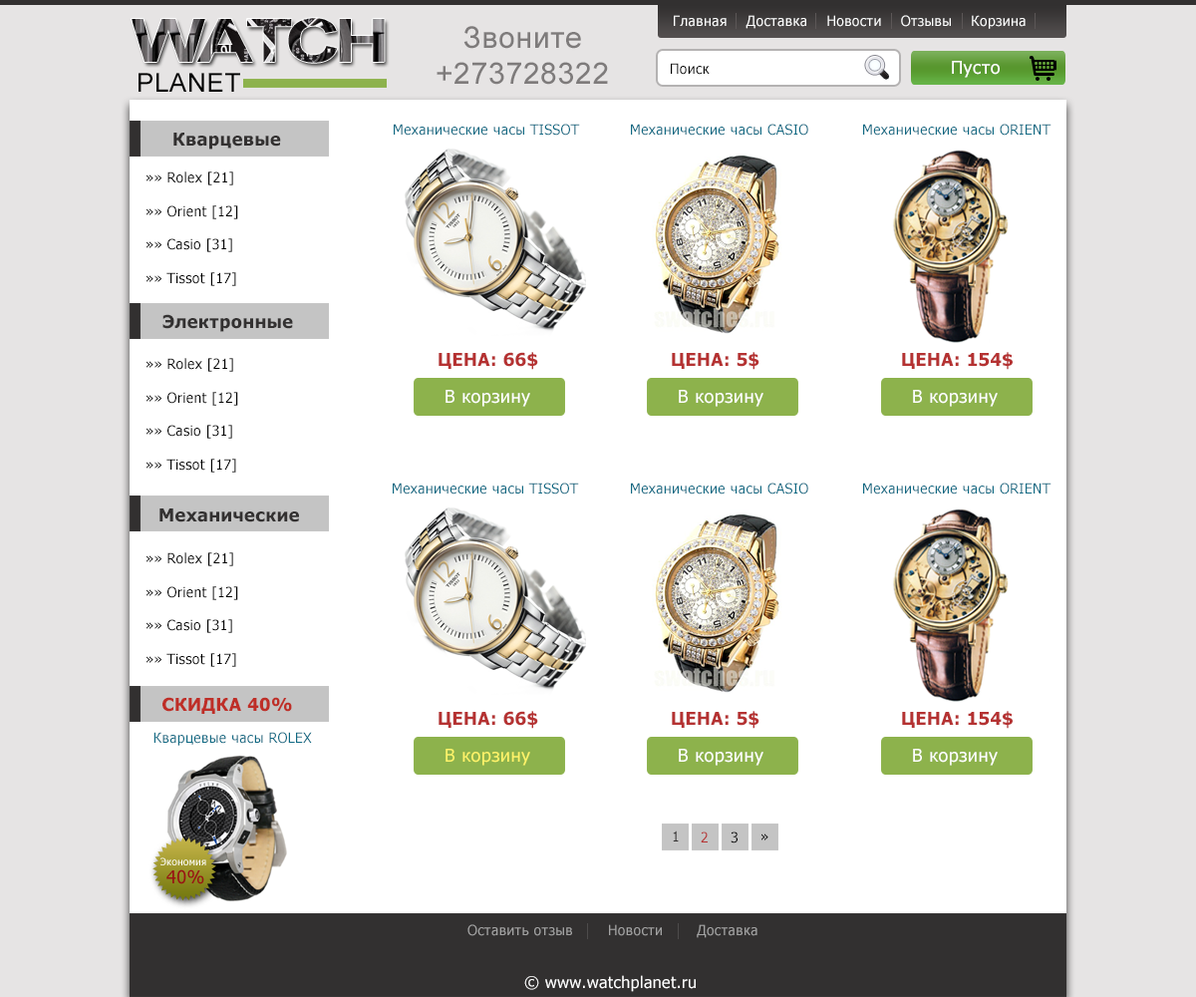
<style>
.page{position:relative;width:1196px;height:997px;background:#ffffff}
.page>*{position:absolute;margin:0}
.t1{font:14px "Tahoma";letter-spacing:0.025em;color:#ffffff}
.t2{font:29.9px "ArialMT";letter-spacing:0.025em;color:#7e7b7b}
.t3{font:14px "Tahoma";letter-spacing:0.025em;color:#010101}
.t4{font:17.9px "Tahoma";letter-spacing:0.025em;color:#ffffff}
.t5{font:25.9px "ArialMT";letter-spacing:0.025em;color:#000000}
.t6{font:14px "Tahoma";letter-spacing:0.025em;color:#0f6a84}
.t7{font:17.9px "Tahoma-Bold";letter-spacing:0.025em;color:#333131}
.t8{font:14px "Tahoma";letter-spacing:0.025em;color:#000000}
.t9{font:17.9px "Tahoma-Bold";letter-spacing:0.025em;color:#b53232}
.t10{font:17.9px "Tahoma-Bold";letter-spacing:0.025em;color:#be2e27}
.t11{font:17.9px "Tahoma";letter-spacing:0.025em;color:#fff369}
.t12{font:14px "Tahoma";letter-spacing:0.025em;color:#323030}
.t13{font:14px "Tahoma";letter-spacing:0.025em;color:#b53232}
.t14{font:14px "Tahoma";letter-spacing:0.025em;color:#a3a3a3}
.t15{font:15.9px "Tahoma";letter-spacing:0.025em;color:#ffffff}
</style>
<div class="page">
<p class="t1" style="left:674px;top:15px;width:352px;height:14px">Главная    Доставка    Новости    Отзывы    Корзина</p>
<p class="t2" style="left:437px;top:26px;width:171px;height:59px;text-align:center">Звоните<br>+273728322</p>
<p class="t3" style="left:671px;top:63px;width:39px;height:12px">Поиск</p>
<p class="t4" style="left:952px;top:61px;width:48px;height:17px">Пусто</p>
<p class="t5" style="left:139px;top:73px;width:101px;height:19px">PLANET</p>
<p class="t6" style="left:394px;top:124px;width:186px;height:12px">Механические часы TISSOT</p>
<p class="t6" style="left:631px;top:124px;width:177px;height:12px">Механические часы CASIO</p>
<p class="t6" style="left:863px;top:124px;width:189px;height:12px">Механические часы ORIENT</p>
<p class="t7" style="left:173px;top:133px;width:108px;height:17px">Кварцевые</p>
<p class="t8" style="left:147px;top:171px;width:91px;height:115px">»» Rolex [21]<br><br>»» Orient [12]<br><br>»» Casio [31]<br><br>»» Tissot [17]</p>
<p class="t7" style="left:162px;top:314px;width:131px;height:18px">Электронные</p>
<p class="t9" style="left:439px;top:352px;width:99px;height:18px">ЦЕНА: 66$</p>
<p class="t9" style="left:672px;top:352px;width:88px;height:18px">ЦЕНА: 5$</p>
<p class="t9" style="left:902px;top:352px;width:111px;height:18px">ЦЕНА: 154$</p>
<p class="t8" style="left:147px;top:358px;width:91px;height:115px">»» Rolex [21]<br><br>»» Orient [12]<br><br>»» Casio [31]<br><br>»» Tissot [17]</p>
<p class="t4" style="left:446px;top:390px;width:84px;height:17px">В корзину</p>
<p class="t4" style="left:679px;top:390px;width:85px;height:17px">В корзину</p>
<p class="t4" style="left:913px;top:390px;width:85px;height:17px">В корзину</p>
<p class="t6" style="left:393px;top:482px;width:186px;height:12px">Механические часы TISSOT</p>
<p class="t6" style="left:631px;top:482px;width:177px;height:12px">Механические часы CASIO</p>
<p class="t6" style="left:863px;top:482px;width:189px;height:12px">Механические часы ORIENT</p>
<p class="t7" style="left:159px;top:508px;width:140px;height:14px">Механические</p>
<p class="t8" style="left:147px;top:552px;width:91px;height:115px">»» Rolex [21]<br><br>»» Orient [12]<br><br>»» Casio [31]<br><br>»» Tissot [17]</p>
<p class="t10" style="left:162px;top:697px;width:130px;height:17px">СКИДКА 40%</p>
<p class="t9" style="left:439px;top:711px;width:99px;height:18px">ЦЕНА: 66$</p>
<p class="t9" style="left:672px;top:711px;width:88px;height:18px">ЦЕНА: 5$</p>
<p class="t9" style="left:902px;top:711px;width:111px;height:18px">ЦЕНА: 154$</p>
<p class="t6" style="left:154px;top:732px;width:158px;height:14px">Кварцевые часы ROLEX</p>
<p class="t11" style="left:446px;top:749px;width:84px;height:17px">В корзину</p>
<p class="t4" style="left:679px;top:749px;width:85px;height:17px">В корзину</p>
<p class="t4" style="left:913px;top:749px;width:85px;height:17px">В корзину</p>
<p class="t12" style="left:673px;top:830px;width:6px;height:11px">1</p>
<p class="t13" style="left:701px;top:831px;width:7px;height:11px">2</p>
<p class="t8" style="left:731px;top:831px;width:7px;height:12px">3</p>
<p class="t8" style="left:762px;top:833px;width:7px;height:7px">»</p>
<p class="t14" style="left:468px;top:924px;width:104px;height:12px">Оставить отзыв</p>
<p class="t14" style="left:609px;top:924px;width:53px;height:12px">Новости</p>
<p class="t14" style="left:697px;top:924px;width:61px;height:14px">Доставка</p>
<p class="t15" style="left:524px;top:975px;width:172px;height:17px">© www.watchplanet.ru</p>
</div>
